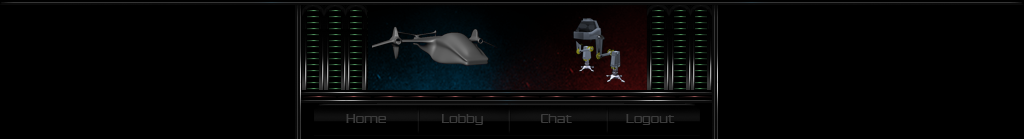
<style>
.page{position:relative;width:1024px;height:139px;background:#000000}
.page>*{position:absolute;margin:0}
.t1{font:14px "Babylon5Credits";color:#3c3c3c}
</style>
<div class="page">
<p class="t1" style="left:346px;top:114px;width:40px;height:9px">Home</p>
<p class="t1" style="left:441px;top:114px;width:42px;height:11px">Lobby</p>
<p class="t1" style="left:541px;top:114px;width:31px;height:9px">Chat</p>
<p class="t1" style="left:626px;top:114px;width:49px;height:11px">Logout</p>
</div>
